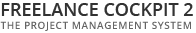
<style>
.page{position:relative;width:196px;height:33px;background:#ffffff}
.page>*{position:absolute;margin:0}
.t1{font:18px "OpenSans-Semibold";color:#323232;text-transform:uppercase}
.t2{font:10px "OpenSans-Semibold";letter-spacing:0.055em;color:#646464;text-transform:uppercase}
</style>
<div class="page">
<p class="t1" style="left:1px;top:3px;width:192px;height:13px">Freelance Cockpit 2</p>
<p class="t2" style="left:0px;top:21px;width:191px;height:10px">The project management system</p>
</div>
